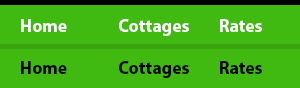
<style>
.page{position:relative;width:300px;height:88px;background:#40b910}
.page>*{position:absolute;margin:0}
.t1{font:18px "MyriadPro-Bold";color:#ffffff}
.t2{font:18px "MyriadPro-Bold";color:#000000}
</style>
<div class="page">
<p class="t1" style="left:21px;top:19px;width:241px;height:17px">Home              Cottages        Rates</p>
<p class="t2" style="left:21px;top:61px;width:241px;height:17px">Home              Cottages        Rates</p>
</div>
